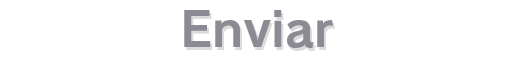
<style>
.page{position:relative;width:512px;height:60px;background:#ffffff}
.page>*{position:absolute;margin:0}
.t1{font:48px "RodinPro-B";color:#8c8b93}
</style>
<div class="page">
<p class="t1" style="left:184px;top:10px;width:149px;height:38px">Enviar</p>
</div>
